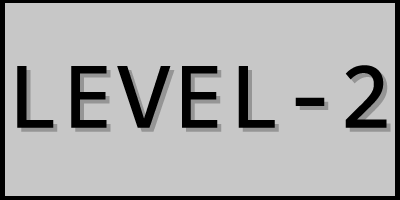
<style>
.page{position:relative;width:400px;height:200px;background:#c7c7c7}
.page>*{position:absolute;margin:0}
.t1{font:96px "Consolas";color:#000000;font-weight:bold}
.t2{font:96px "Consolas";font-weight:bold}
</style>
<div class="page">
<p class="t1" style="left:17px;top:65px;width:370px;height:63px">LEVEL-2</p>
<p class="t2" style="left:21px;top:69px;width:370px;height:63px">LEVEL-2</p>
</div>
